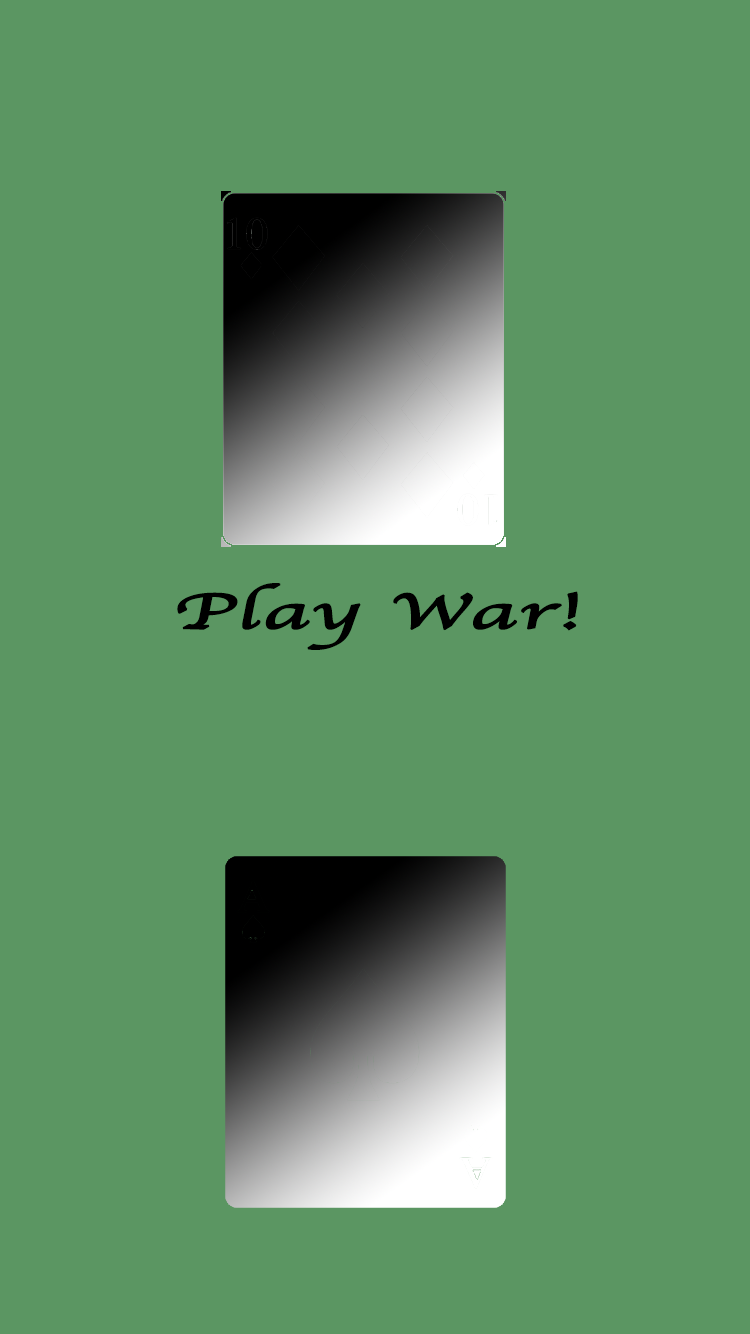
<style>
.page{position:relative;width:750px;height:1334px;background:#5b9662}
.page>*{position:absolute;margin:0}
.t1{font:51px "Apple-Chancery";color:#000000;font-weight:bold;scale:1.76 1}
</style>
<div class="page">
<p class="t1" style="left:177px;top:583px;width:401px;height:67px">Play War!</p>
</div>
